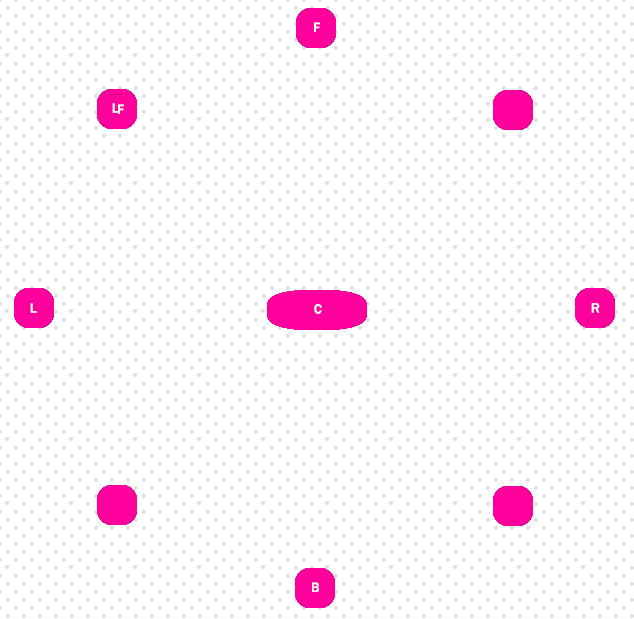
<style>
.page{position:relative;width:634px;height:619px;background:#ffffff}
.page>*{position:absolute;margin:0}
.t1{font:14px "FranklinGothic-Medium";color:#ffffff}
</style>
<div class="page">
<p class="t1" style="left:314px;top:22px;width:6px;height:10px">F</p>
<p class="t1" style="left:112px;top:103px;width:7px;height:10px">L</p>
<p class="t1" style="left:118px;top:104px;width:6px;height:10px">F</p>
<p class="t1" style="left:30px;top:303px;width:7px;height:10px">L</p>
<p class="t1" style="left:314px;top:304px;width:8px;height:10px">C</p>
<p class="t1" style="left:591px;top:303px;width:9px;height:10px">R</p>
<p class="t1" style="left:312px;top:582px;width:7px;height:10px">B</p>
</div>
